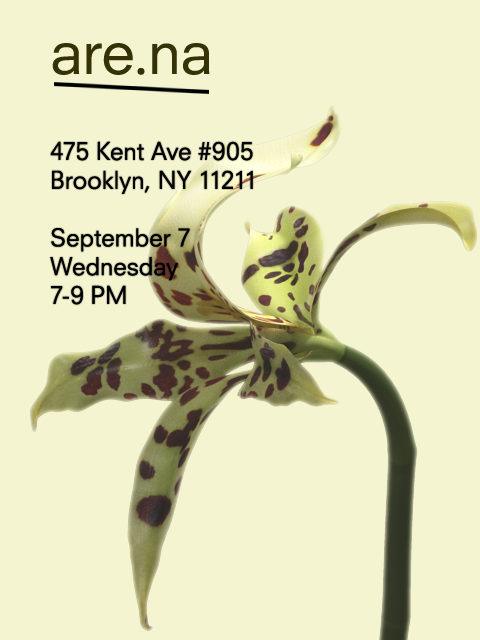
<style>
.page{position:relative;width:480px;height:640px;background:#f5f4d0}
.page>*{position:absolute;margin:0}
.t1{font:60px "NeuzeitSLTStd-Book";color:#353106}
.t2{font:24px "NeuzeitSLTStd-Book";color:#000000}
</style>
<div class="page">
<p class="t1" style="left:52px;top:43px;width:158px;height:32px">are.na</p>
<p class="t2" style="left:50px;top:141px;width:203px;height:164px">475 Kent Ave #905<br>Brooklyn, NY 11211<br><br>September 7<br>Wednesday<br>7-9 PM</p>
</div>
